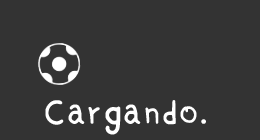
<style>
.page{position:relative;width:260px;height:140px;background:#333333}
.page>*{position:absolute;margin:0}
.t1{font:45px "Brutal_bounce-Regular";color:#ffffff}
</style>
<div class="page">
<p class="t1" style="left:45px;top:100px;width:152px;height:35px">Cargando</p>
<p class="t1" style="left:201px;top:119px;width:5px;height:5px">.</p>
</div>
